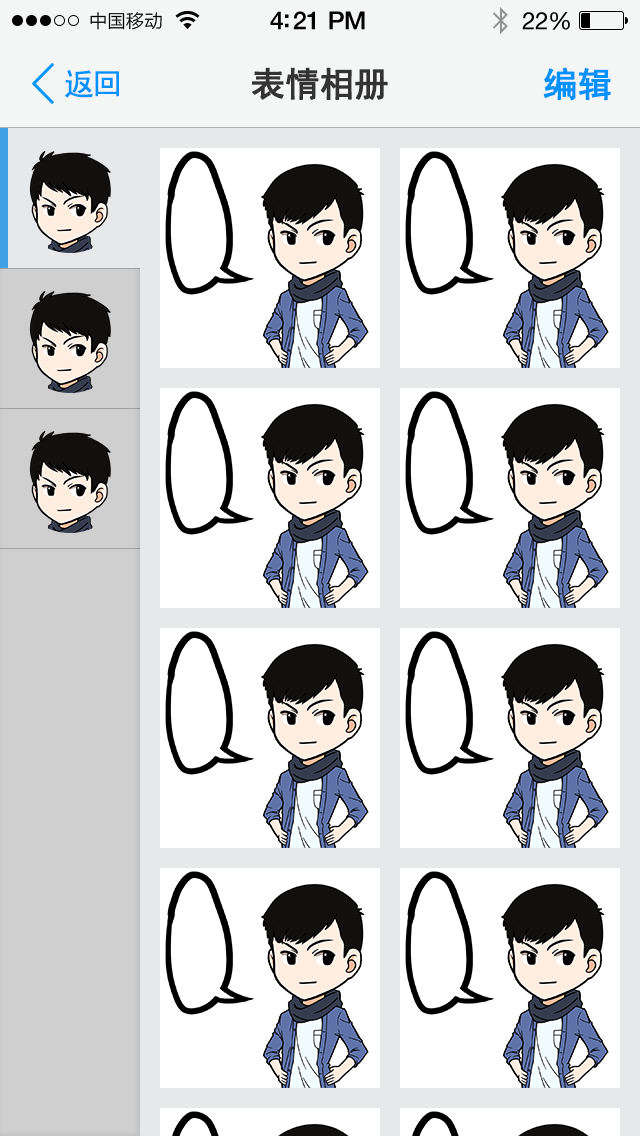
<style>
.page{position:relative;width:640px;height:1136px;background:#ffffff}
.page>*{position:absolute;margin:0}
.t1{font:30px "SimHei";letter-spacing:-0.075em;color:#0192ff;font-weight:bold}
.t2{font:34px "SimHei";letter-spacing:-0.01em;color:#333333;font-weight:bold}
.t3{font:34px "SimHei";letter-spacing:-0.01em;color:#0192ff;font-weight:bold}
</style>
<div class="page">
<p class="t1" style="left:65px;top:70px;width:54px;height:28px">返回</p>
<p class="t2" style="left:252px;top:67px;width:136px;height:33px">表情相册</p>
<p class="t3" style="left:543px;top:67px;width:68px;height:34px">编辑</p>
</div>
